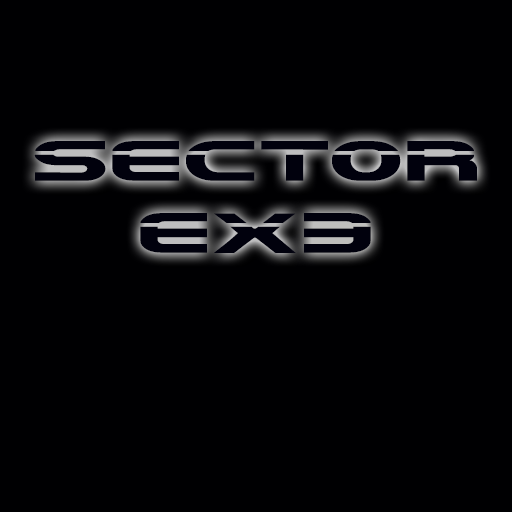
<style>
.page{position:relative;width:512px;height:512px;background:#000002}
.page>*{position:absolute;margin:0}
.t1{font:60px "Laserian";color:#01010d}
</style>
<div class="page">
<p class="t1" style="left:34px;top:141px;width:443px;height:40px">SECTOR</p>
<p class="t1" style="left:140px;top:213px;width:156px;height:40px">EX</p>
<p class="t1" style="left:304px;top:213px;width:67px;height:40px;rotate:180deg">E</p>
</div>
